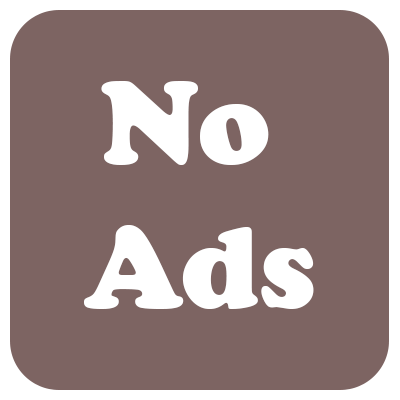
<style>
.page{position:relative;width:400px;height:400px;background:#7d6462}
.page>*{position:absolute;margin:0}
.t1{font:119.9px "CooperBlack";color:#ffffff}
</style>
<div class="page">
<p class="t1" style="left:84px;top:81px;width:230px;height:228px;text-align:center">No <br>Ads</p>
</div>
